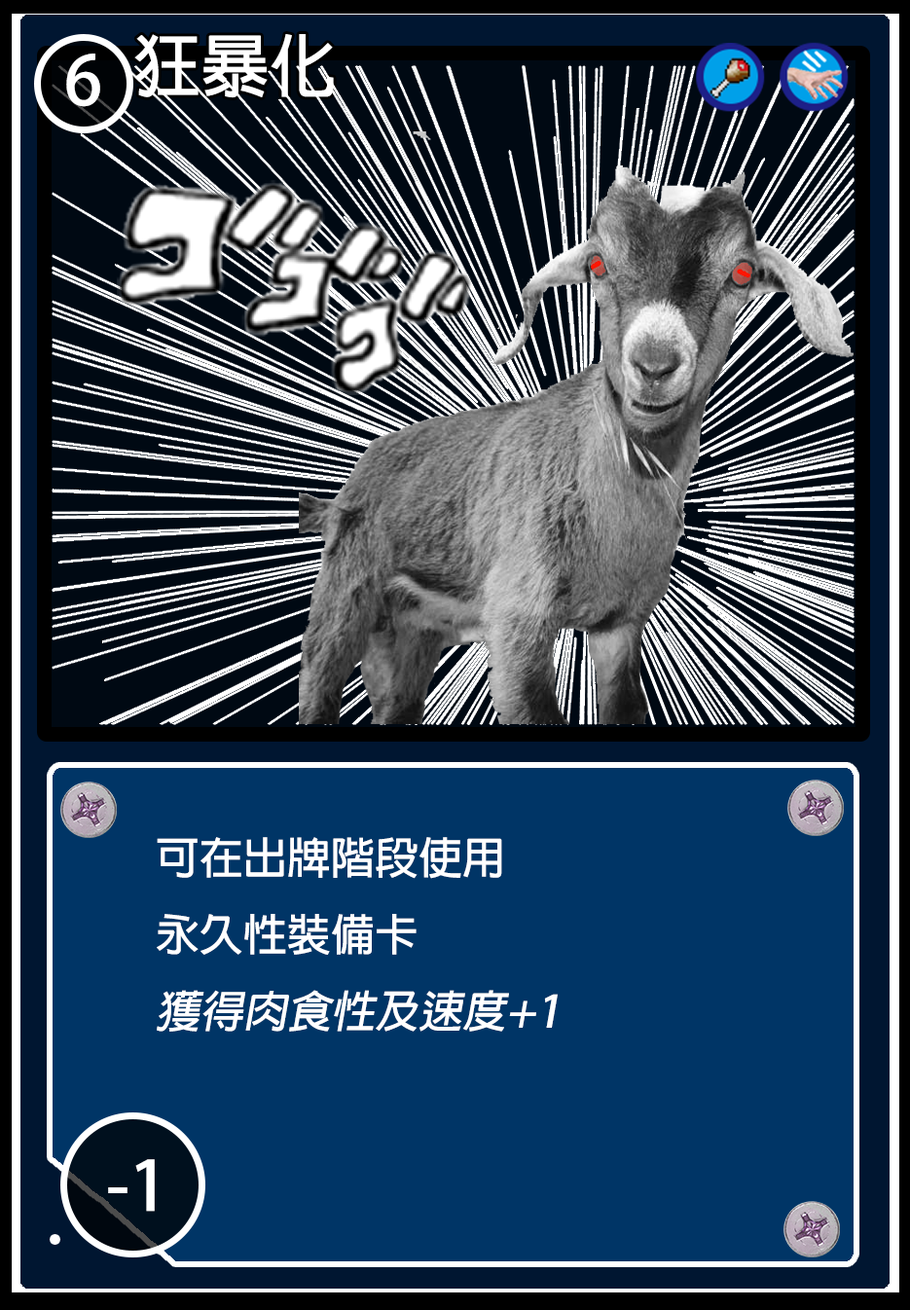
<style>
.page{position:relative;width:910px;height:1310px;background:#003566}
.page>*{position:absolute;margin:0}
.t1{font:68.1px "AdobeFanHeitiStd-Bold";color:#ffffff}
.t2{font:67.8px "AdobeFanHeitiStd-Bold";color:#ffffff}
.t3{font:43.8px "AdobeFanHeitiStd-Bold";color:#ffffff}
.t4{font:43.8px "AdobeFanHeitiStd-Bold";color:#ffffff;font-style:italic}
</style>
<div class="page">
<p class="t1" style="left:134px;top:34px;width:200px;height:64px">狂暴化</p>
<p class="t2" style="left:66px;top:54px;width:34px;height:53px">6</p>
<p class="t3" style="left:157px;top:837px;width:401px;height:195px">可在出牌階段使用<br>永久性裝備卡<br><span class="t4">獲得肉食性及速度+1</span></p>
<p class="t1" style="left:108px;top:1159px;width:47px;height:53px">-1</p>
</div>
